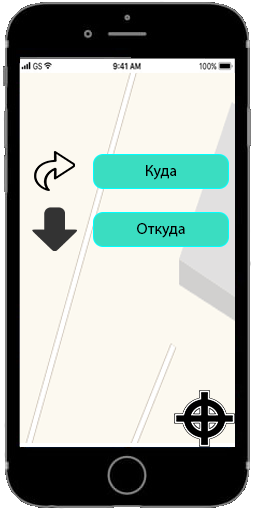
<style>
.page{position:relative;width:254px;height:511px;background:#fcf9f0}
.page>*{position:absolute;margin:0}
.t1{font:12px "MyriadPro-Regular";color:#000000}
</style>
<div class="page">
<p class="t1" style="left:146px;top:165px;width:31px;height:15px">Куда</p>
<p class="t1" style="left:137px;top:223px;width:48px;height:15px">Откуда</p>
</div>
